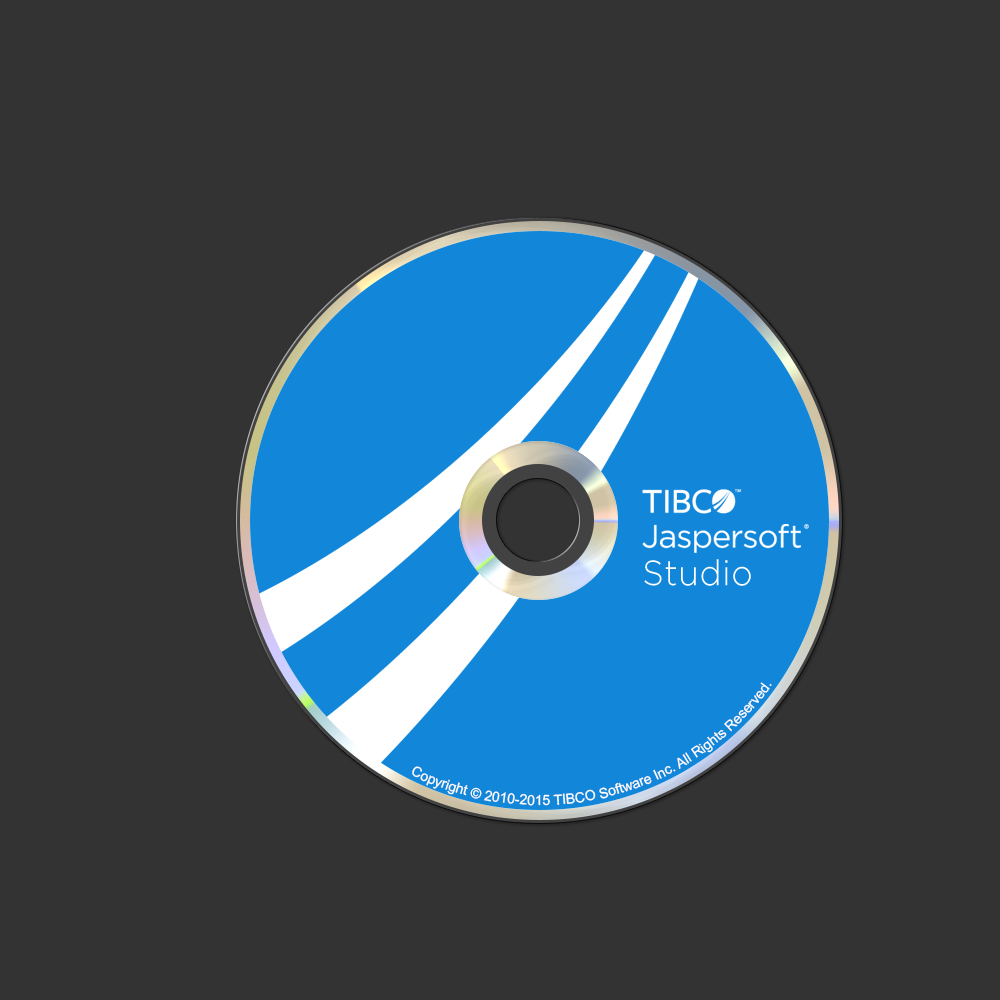
<style>
.page{position:relative;width:1000px;height:1000px;background:#333333}
.page>*{position:absolute;margin:0}
.t1{font:35.5px "GothamLight";letter-spacing:0.02em;color:#ffffff;scale:0.94 1}
.t2{font:14px "ArialMT";color:#ffffff}
</style>
<div class="page">
<p class="t1" style="left:644px;top:559px;width:107px;height:27px">Studio</p>
<p class="t2" style="left:412px;top:682px;width:360px;height:124px">Copyright © 2010-2015 TIBCO Software Inc. All Rights Reserved.</p>
</div>
